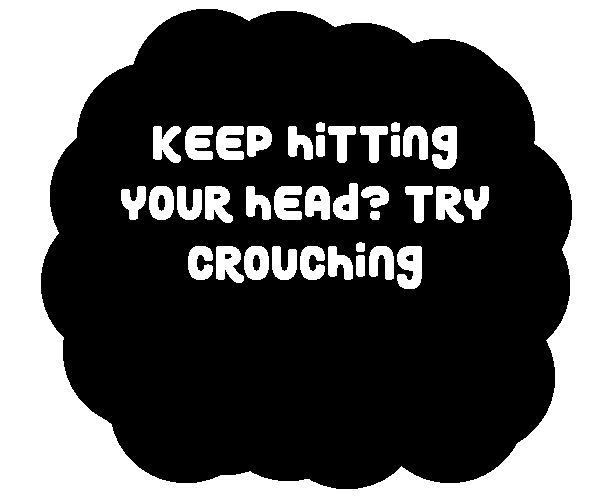
<style>
.page{position:relative;width:600px;height:500px;background:#000000}
.page>*{position:absolute;margin:0}
.t1{font:50px "RoundyRainbows";color:#ffffff}
</style>
<div class="page">
<p class="t1" style="left:121px;top:122px;width:368px;height:167px;text-align:center">Keep hitting your head? Try Crouching</p>
</div>
